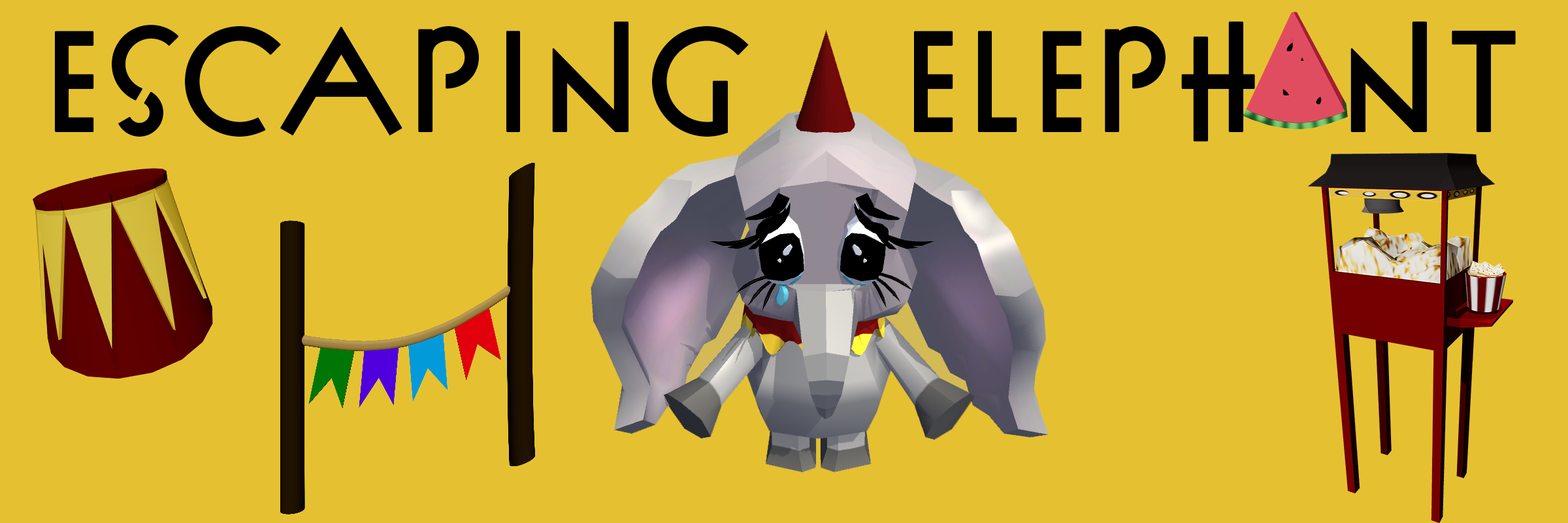
<style>
.page{position:relative;width:1568px;height:523px;background:#e5c131}
.page>*{position:absolute;margin:0}
.t1{font:155.9px "P22FLWExhibition-Bold";color:#000000;font-weight:bold}
</style>
<div class="page">
<p class="t1" style="left:54px;top:21px;width:1462px;height:121px">Escaping  Eleph nt</p>
</div>
